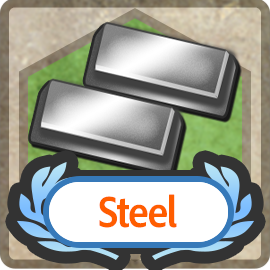
<style>
.page{position:relative;width:270px;height:270px}
.page>*{position:absolute;margin:0}
.t1{font:45px "AdobeClean-Bold";letter-spacing:-0.04em;color:#ff5d00;scale:0.9 1}
</style>
<div class="page">
<p class="t1" style="left:99px;top:194px;width:78px;height:34px">Steel</p>
</div>
